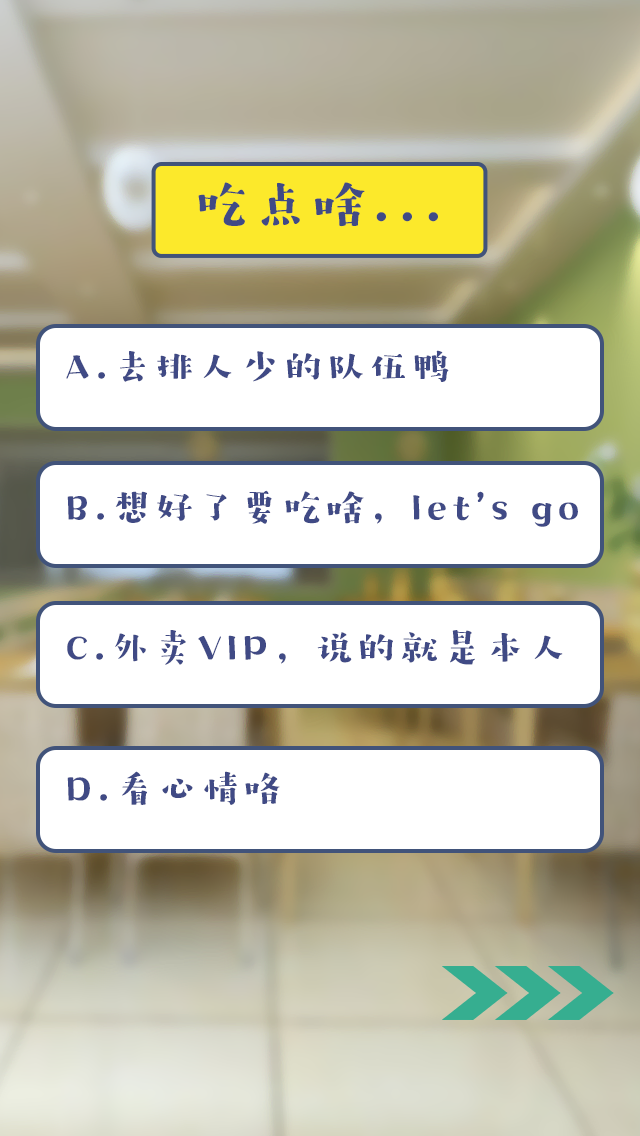
<style>
.page{position:relative;width:640px;height:1136px;background:#ffffff}
.page>*{position:absolute;margin:0}
.t1{font:53.5px "HYZiYanHuanLeSongW";letter-spacing:0.1em;color:#404a85}
.t2{font:38.9px "HYZiYanHuanLeSongW";letter-spacing:0.1em;color:#404a85}
.t3{font:38.9px "HYXingQiuTiW";letter-spacing:0.1em;color:#404a85}
</style>
<div class="page">
<p class="t1" style="left:198px;top:182px;width:240px;height:45px">吃点啥...</p>
<p class="t2" style="left:66px;top:350px;width:383px;height:32px">A.去排人少的队伍鸭</p>
<p class="t2" style="left:67px;top:490px;width:511px;height:37px">B.想好了要吃啥，let<span class="t3">’</span>s go</p>
<p class="t2" style="left:67px;top:630px;width:496px;height:35px">C.外卖VIP，说的就是本人</p>
<p class="t2" style="left:67px;top:771px;width:213px;height:34px">D.看心情咯</p>
</div>
